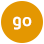
<style>
.page{position:relative;width:44px;height:44px;background:#e49701}
.page>*{position:absolute;margin:0}
.t1{font:18px "MavenProBold";color:#ffffff}
</style>
<div class="page">
<p class="t1" style="left:13px;top:16px;width:19px;height:14px">go</p>
</div>
